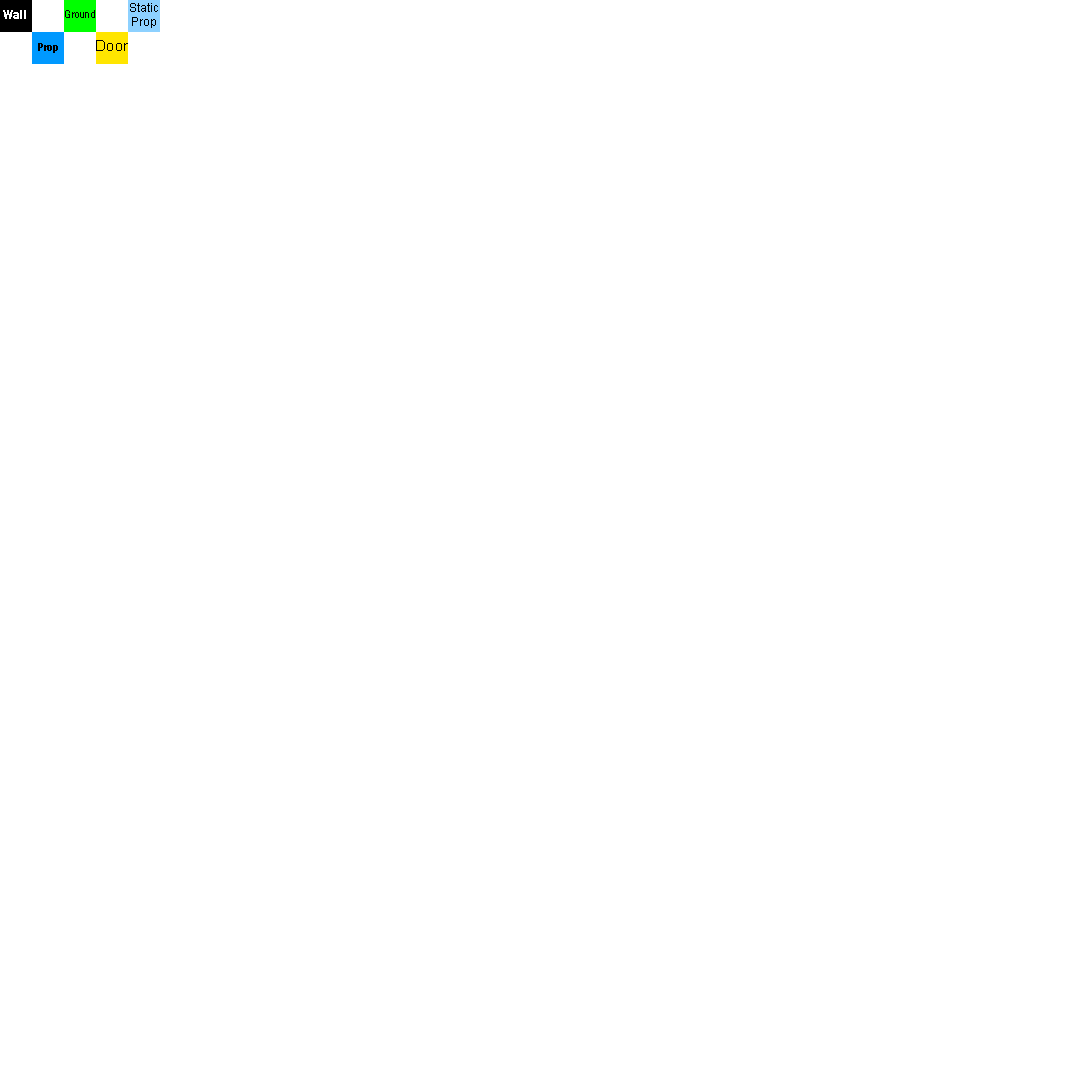
<style>
.page{position:relative;width:1080px;height:1080px;background:#ffffff}
.page>*{position:absolute;margin:0}
.t1{font:12.2px "ArialMT";color:#000000}
.t2{font:13.7px "FranklinGothic-DemiCond";color:#ffffff}
.t3{font:10.6px "FranklinGothic-DemiCond";color:#000000}
.t4{font:14.8px "ArialMT";color:#000000}
.t5{font:11.7px "FranklinGothic-DemiCond";color:#000000}
</style>
<div class="page">
<p class="t1" style="left:130px;top:3px;width:28px;height:25px;text-align:center">Static<br>Prop</p>
<p class="t2" style="left:3px;top:10px;width:23px;height:9px">Wall</p>
<p class="t3" style="left:65px;top:10px;width:30px;height:8px">Ground</p>
<p class="t4" style="left:96px;top:40px;width:32px;height:11px">Door</p>
<p class="t5" style="left:38px;top:43px;width:20px;height:10px">Prop</p>
</div>
